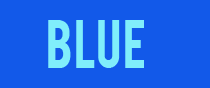
<style>
.page{position:relative;width:210px;height:88px;background:#1259e9}
.page>*{position:absolute;margin:0}
.t1{font:53.6px "Bebas";color:#80eefb;scale:0.91 1}
</style>
<div class="page">
<p class="t1" style="left:48px;top:20px;width:96px;height:48px">blue</p>
</div>
